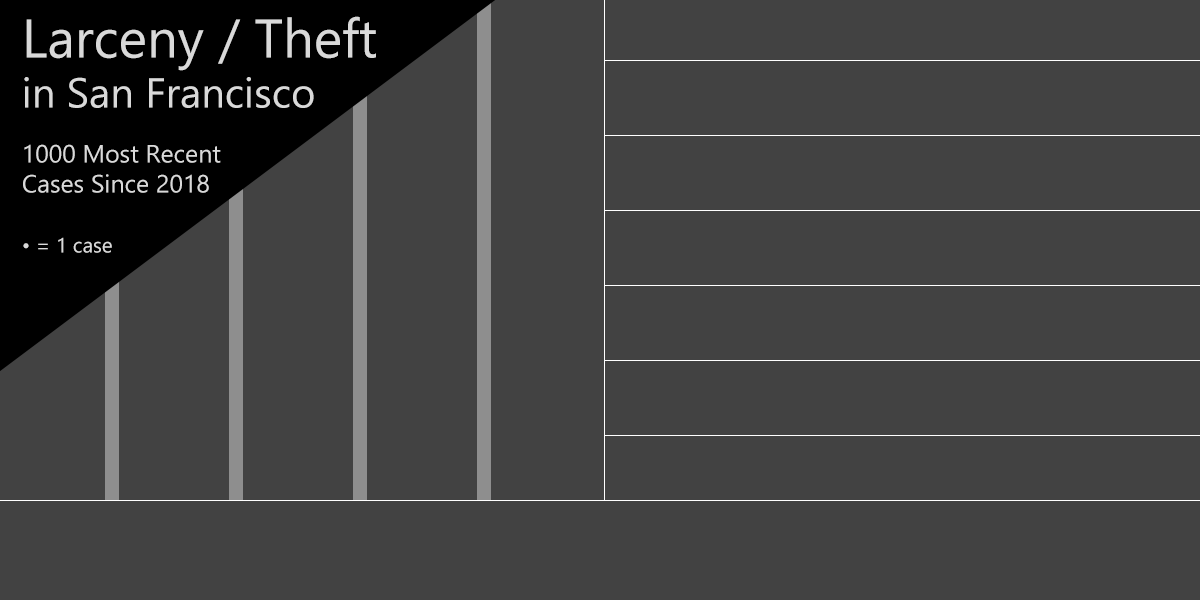
<style>
.page{position:relative;width:1200px;height:600px;background:#424242}
.page>*{position:absolute;margin:0}
.t1{font:25px "Ebrima";color:#d9d9d9}
.t2{font:54.2px "Ebrima";color:#d9d9d9}
.t3{font:41.7px "Ebrima";color:#d9d9d9}
.t4{font:20.8px "Ebrima";color:#d9d9d9}
</style>
<div class="page">
<p class="t1" style="left:23px;top:16px;width:353px;height:237px"><span class="t2">Larceny / Theft<br></span><span class="t3">in San Francisco<br><br></span>1000 Most Recent<br>Cases Since 2018<br><br><span class="t4">• = 1 case</span></p>
</div>
